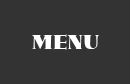
<style>
.page{position:relative;width:130px;height:84px;background:#333333}
.page>*{position:absolute;margin:0}
.t1{font:20px "Vogue";color:#ffffff}
</style>
<div class="page">
<p class="t1" style="left:32px;top:34px;width:67px;height:16px">MENU</p>
</div>
